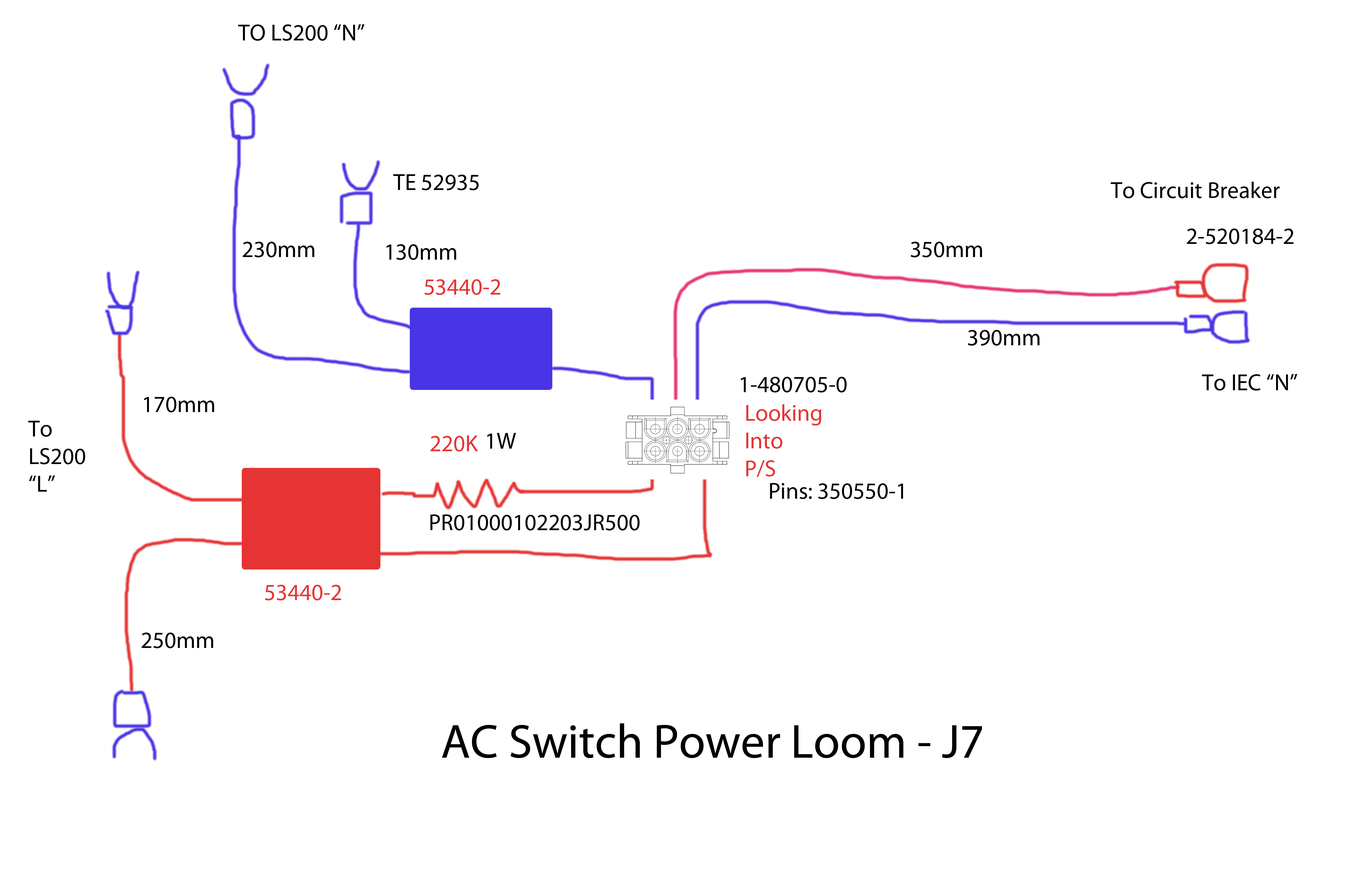
<style>
.page{position:relative;width:1356px;height:879px;background:#ffffff}
.page>*{position:absolute;margin:0}
.t1{font:23.1px "MyriadPro-Regular";color:#000000}
.t2{font:23.1px "MyriadPro-Regular";color:#e63434}
.t3{font:48.2px "MyriadPro-Regular";color:#000000}
</style>
<div class="page">
<p class="t1" style="left:238px;top:24px;width:126px;height:17px">TO LS200 “N”</p>
<p class="t1" style="left:393px;top:174px;width:86px;height:16px">TE 52935</p>
<p class="t1" style="left:1111px;top:182px;width:169px;height:16px">To Circuit Breaker</p>
<p class="t1" style="left:1187px;top:229px;width:107px;height:15px">2-520184-2</p>
<p class="t1" style="left:243px;top:242px;width:71px;height:15px">230mm</p>
<p class="t1" style="left:386px;top:244px;width:70px;height:16px">130mm</p>
<p class="t1" style="left:910px;top:242px;width:72px;height:15px">350mm</p>
<p class="t2" style="left:424px;top:279px;width:77px;height:16px">53440-2</p>
<p class="t1" style="left:968px;top:330px;width:72px;height:16px">390mm</p>
<p class="t1" style="left:741px;top:377px;width:106px;height:16px">1-480705-0</p>
<p class="t1" style="left:1202px;top:374px;width:95px;height:17px">To IEC “N”</p>
<p class="t1" style="left:144px;top:397px;width:70px;height:16px">170mm</p>
<p class="t2" style="left:746px;top:405px;width:76px;height:72px">Looking<br>Into<br>P/S</p>
<p class="t1" style="left:28px;top:421px;width:57px;height:71px">To<br>LS200<br>“L”</p>
<p class="t1" style="left:487px;top:433px;width:29px;height:16px">1W</p>
<p class="t1" style="left:770px;top:483px;width:133px;height:16px">Pins: 350550-1</p>
<p class="t1" style="left:430px;top:515px;width:210px;height:16px">PR01000102203JR500</p>
<p class="t2" style="left:265px;top:585px;width:76px;height:16px">53440-2</p>
<p class="t1" style="left:142px;top:633px;width:71px;height:16px">250mm</p>
<p class="t3" style="left:442px;top:724px;width:540px;height:35px">AC Switch Power Loom - J7</p>
</div>
